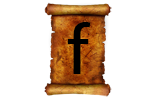
<style>
.page{position:relative;width:155px;height:100px;background:#ffffff}
.page>*{position:absolute;margin:0}
.t1{font:66.5px "Roboto-Regular";letter-spacing:0.025em;color:#000000;scale:1.05 1}
</style>
<div class="page">
<p class="t1" style="left:67px;top:22px;width:24px;height:52px">f</p>
</div>
